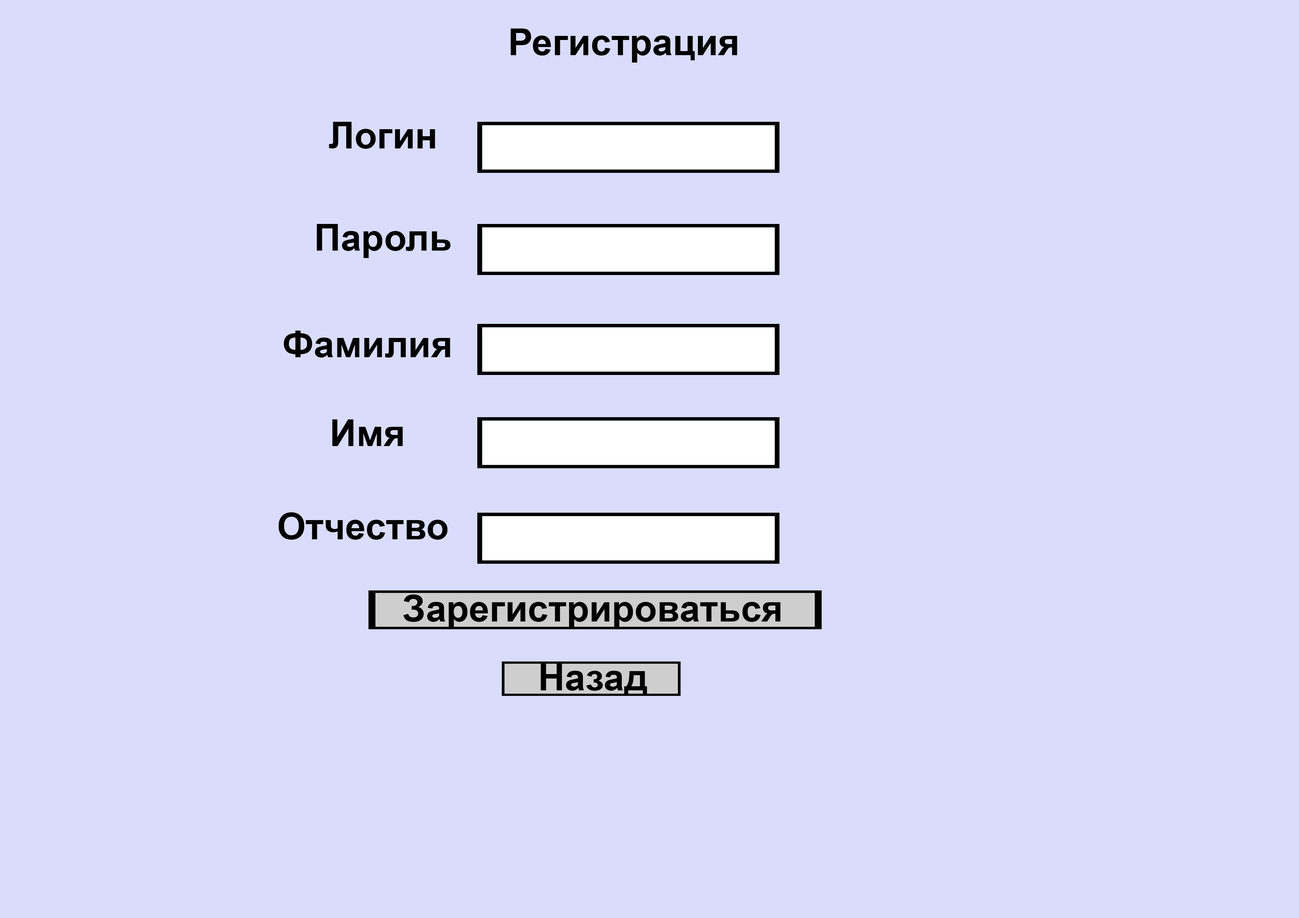
<style>
.page{position:relative;width:1299px;height:918px;background:#d9ddfb}
.page>*{position:absolute;margin:0}
.t1{font:37px "Arial-BoldMT";color:#000000}
</style>
<div class="page">
<p class="t1" style="left:329px;top:122px;width:106px;height:27px">Логин</p>
<p class="t1" style="left:317px;top:224px;width:134px;height:34px">Пароль</p>
<p class="t1" style="left:284px;top:331px;width:166px;height:27px">Фамилия</p>
<p class="t1" style="left:332px;top:419px;width:71px;height:27px">Имя</p>
<p class="t1" style="left:278px;top:512px;width:170px;height:28px">Отчество</p>
<p class="t1" style="left:403px;top:595px;width:377px;height:34px">Зарегистрироваться</p>
<p class="t1" style="left:541px;top:664px;width:106px;height:32px">Назад</p>
</div>
